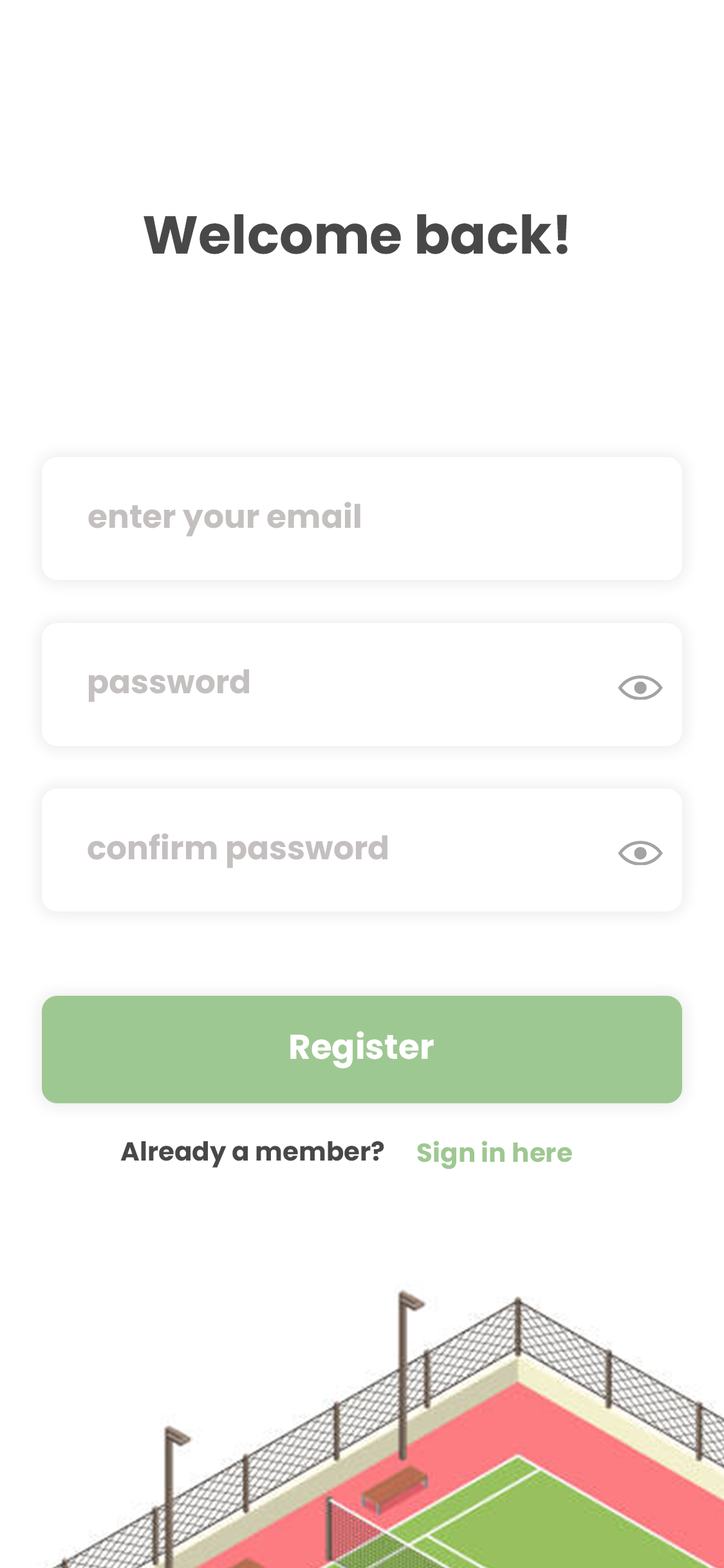
<style>
.page{position:relative;width:724px;height:1568px;background:#ffffff}
.page>*{position:absolute;margin:0}
.t1{font:53.4px "Poppins-Bold";color:#484848}
.t2{font:32.4px "Poppins-Bold";color:#c5c0c0}
.t3{font:34.3px "Poppins-Bold";color:#ffffff}
.t4{font:26.1px "Poppins-Bold";color:#484848}
.t5{font:26.1px "Poppins-Bold";color:#9ec891}
</style>
<div class="page">
<p class="t1" style="left:144px;top:214px;width:424px;height:40px">Welcome back!</p>
<p class="t2" style="left:88px;top:501px;width:272px;height:36px">enter your email</p>
<p class="t2" style="left:89px;top:669px;width:160px;height:33px">password</p>
<p class="t2" style="left:88px;top:833px;width:299px;height:35px">confirm password</p>
<p class="t3" style="left:290px;top:1031px;width:144px;height:38px">Register</p>
<p class="t4" style="left:120px;top:1141px;width:264px;height:27px">Already a member?</p>
<p class="t5" style="left:417px;top:1141px;width:155px;height:29px">Sign in here</p>
</div>
